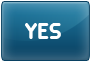
<style>
.page{position:relative;width:91px;height:62px}
.page>*{position:absolute;margin:0}
.t1{font:25px "zArista";color:#ffffff}
</style>
<div class="page">
<p class="t1" style="left:25px;top:23px;width:36px;height:16px">YES</p>
</div>
